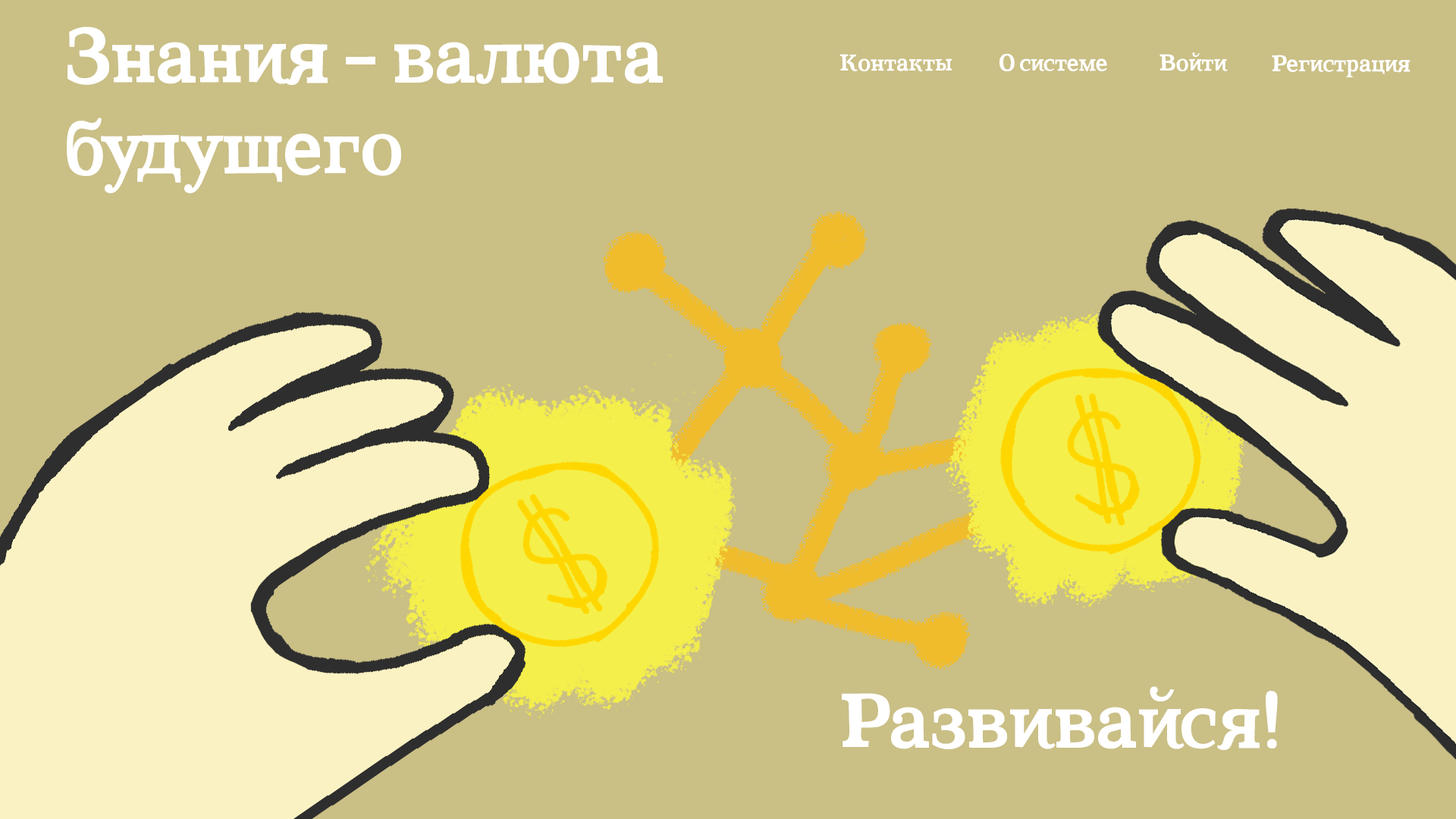
<style>
.page{position:relative;width:1456px;height:819px;background:#cabf85}
.page>*{position:absolute;margin:0}
.t1{font:75.8px "CoatsBold-Bold";color:#ffffff}
.t2{font:22.7px "CoatsBold-Bold";color:#ffffff}
</style>
<div class="page">
<p class="t1" style="left:67px;top:27px;width:596px;height:166px">Знания - валюта<br>будущего</p>
<p class="t2" style="left:839px;top:54px;width:113px;height:18px">Контакты</p>
<p class="t2" style="left:999px;top:53px;width:108px;height:18px">О системе</p>
<p class="t2" style="left:1159px;top:52px;width:69px;height:19px">Войти</p>
<p class="t2" style="left:1272px;top:55px;width:138px;height:22px">Регистрация</p>
<p class="t1" style="left:842px;top:686px;width:436px;height:64px">Развивайся!</p>
</div>
